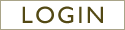
<style>
.page{position:relative;width:125px;height:30px;background:#ffffff}
.page>*{position:absolute;margin:0}
.t1{font:24px "GillSans";letter-spacing:0.1em;color:#534914}
</style>
<div class="page">
<p class="t1" style="left:22px;top:6px;width:81px;height:18px">LOGIN</p>
</div>
